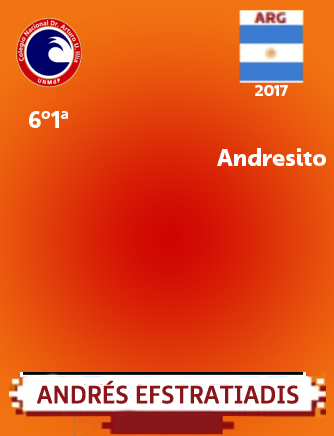
<style>
.page{position:relative;width:334px;height:436px}
.page>*{position:absolute;margin:0}
.t1{font:24px "Dulcian-NorBol";color:#fffefe}
.t2{font:24px "FSMillbankNegativeTrial";color:#88161a;font-weight:bold}
.t3{font:24px "FSMillbankNegative-Regular";color:#88161a;font-weight:bold}
</style>
<div class="page">
<p class="t1" style="left:29px;top:111px;width:39px;height:17px">6º1ª</p>
<p class="t1" style="left:217px;top:148px;width:109px;height:18px">Andresito</p>
<p class="t2" style="left:37px;top:380px;width:262px;height:24px">ANDR<span class="t3">É</span>S EFSTRATIADIS</p>
</div>
